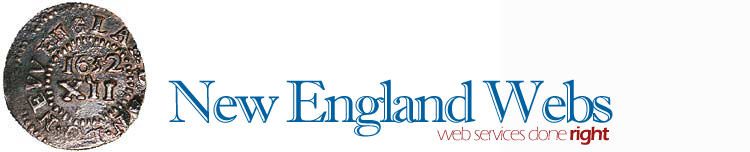
<style>
.page{position:relative;width:750px;height:152px;background:#ffffff}
.page>*{position:absolute;margin:0}
.t1{font:60px "ImprintMT-Shadow";letter-spacing:-0.075em;color:#0061a0}
.t2{font:20px "ErasITC-Light";letter-spacing:-0.075em;color:#9d1616}
.t3{font:20px "ErasITC-Demi";letter-spacing:-0.075em;color:#9d1616}
</style>
<div class="page">
<p class="t1" style="left:168px;top:79px;width:445px;height:58px">New England Webs</p>
<p class="t2" style="left:437px;top:126px;width:172px;height:19px">web services done <span class="t3">right</span></p>
</div>
